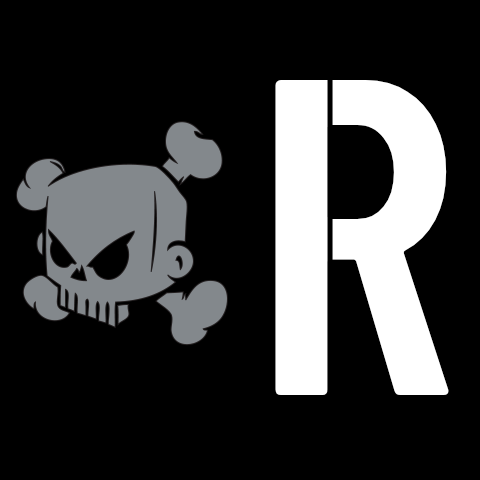
<style>
.page{position:relative;width:480px;height:480px;background:#000000}
.page>*{position:absolute;margin:0}
.t1{font:450px "BarlowCondensed-SemiBold";color:#ffffff}
</style>
<div class="page">
<p class="t1" style="left:275px;top:80px;width:174px;height:315px">R</p>
</div>
